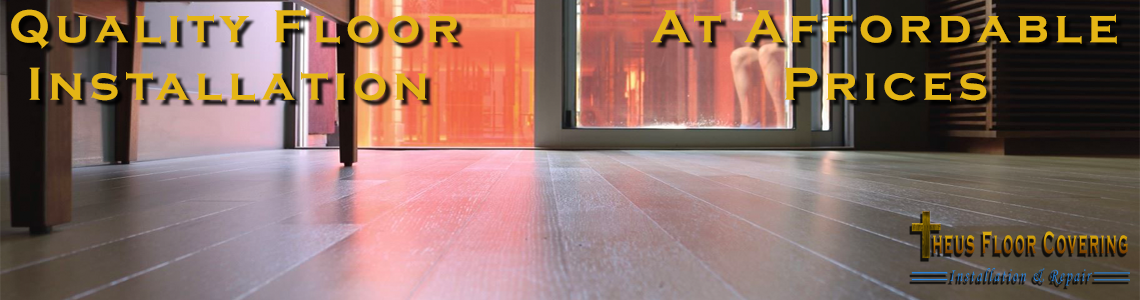
<style>
.page{position:relative;width:1140px;height:300px}
.page>*{position:absolute;margin:0}
.t1{font:48px "CopperplateGothic-Bold";letter-spacing:0.12em;color:#e4b515}
</style>
<div class="page">
<p class="t1" style="left:11px;top:8px;width:448px;height:94px">Quality Floor  <br> Installation</p>
<p class="t1" style="left:651px;top:10px;width:466px;height:92px;text-align:center">At Affordable <br>Prices</p>
</div>
